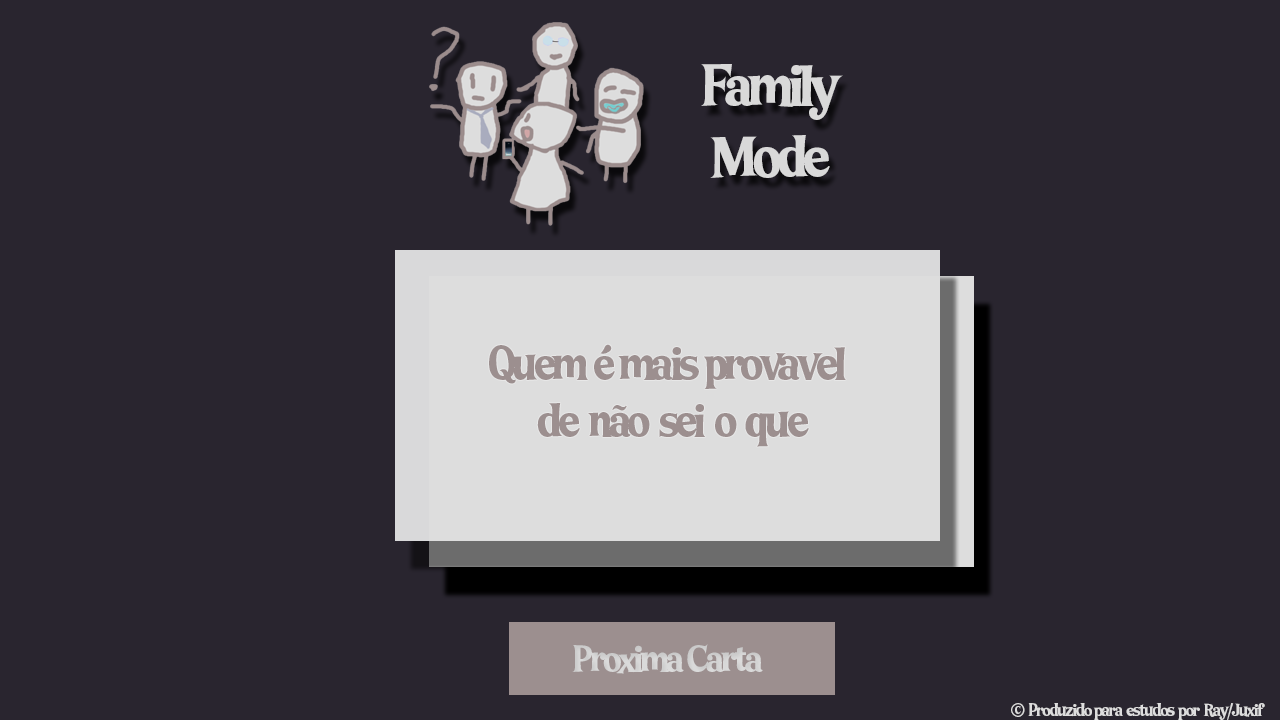
<style>
.page{position:relative;width:1280px;height:720px;background:#29252f}
.page>*{position:absolute;margin:0}
.t1{font:59.7px "LTFunk-Bold";letter-spacing:-0.08em;color:#dddddd}
.t2{font:48px "LTFunk-Bold";letter-spacing:-0.08em;color:#9c8f8f}
.t3{font:37.9px "LTFunk-Bold";letter-spacing:-0.08em;color:#dddddd}
.t4{font:18px "LTFunk-Bold";letter-spacing:-0.08em;color:#dddddd}
</style>
<div class="page">
<p class="t1" style="left:701px;top:64px;width:142px;height:114px;text-align:center;opacity:0.97">Family<br>Mode</p>
<p class="t2" style="left:489px;top:344px;width:357px;height:103px;text-align:center">Quem  é  mais  provavel   <br>de   não   sei   o   que</p>
<p class="t3" style="left:572px;top:644px;width:191px;height:30px">Proxima  Carta</p>
<p class="t4" style="left:1011px;top:703px;width:254px;height:17px">©   Produzido  para   estudos   por   Ray/Juxif</p>
</div>
